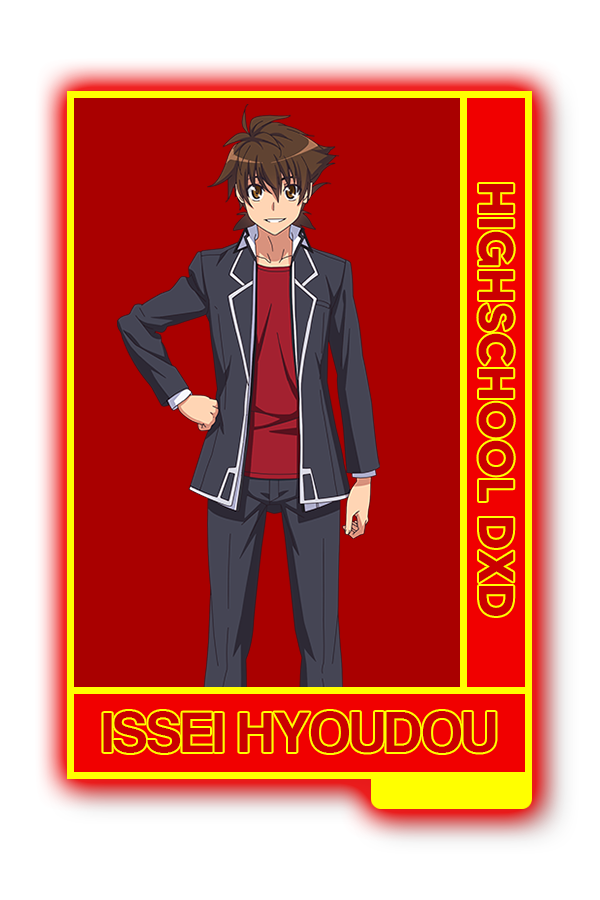
<style>
.page{position:relative;width:600px;height:900px;background:#a90000}
.page>*{position:absolute;margin:0}
.t1{font:48.8px "MADETOMMY-Bold";color:#ca0000}
.t2{font:60.1px "CoolveticaRg-Regular";color:#ca0000}
</style>
<div class="page">
<p class="t1" style="left:478px;top:184px;width:36px;height:432px;rotate:90deg">HIGHSCHOOL DXD</p>
<p class="t2" style="left:103px;top:711px;width:393px;height:42px">ISSEI HYOUDOU</p>
</div>
